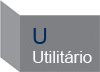
<style>
.page{position:relative;width:100px;height:72px;background:#7f8084}
.page>*{position:absolute;margin:0}
.t1{font:22.2px "ArialMT";color:#002b5f}
.t2{font:16.7px "ArialMT";color:#f8fafc}
</style>
<div class="page">
<p class="t1" style="left:33px;top:28px;width:14px;height:16px">U</p>
<p class="t2" style="left:33px;top:51px;width:59px;height:12px">Utilitário</p>
</div>
